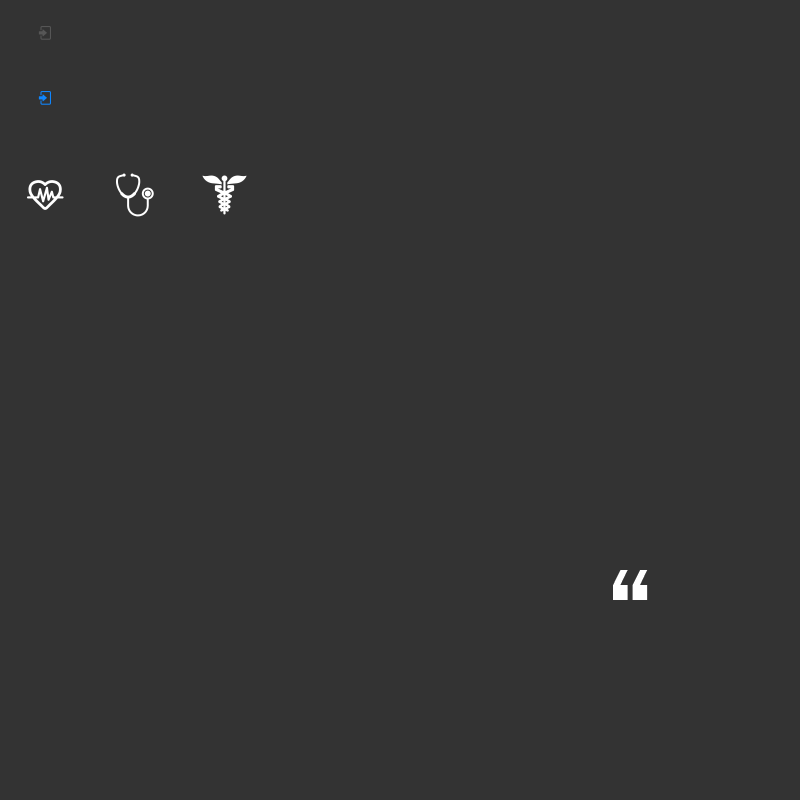
<style>
.page{position:relative;width:800px;height:800px;background:#333333}
.page>*{position:absolute;margin:0}
.t1{font:100px "Aldrich";color:#ffffff;text-transform:uppercase}
</style>
<div class="page">
<p class="t1" style="left:613px;top:570px;width:35px;height:30px">“</p>
</div>
